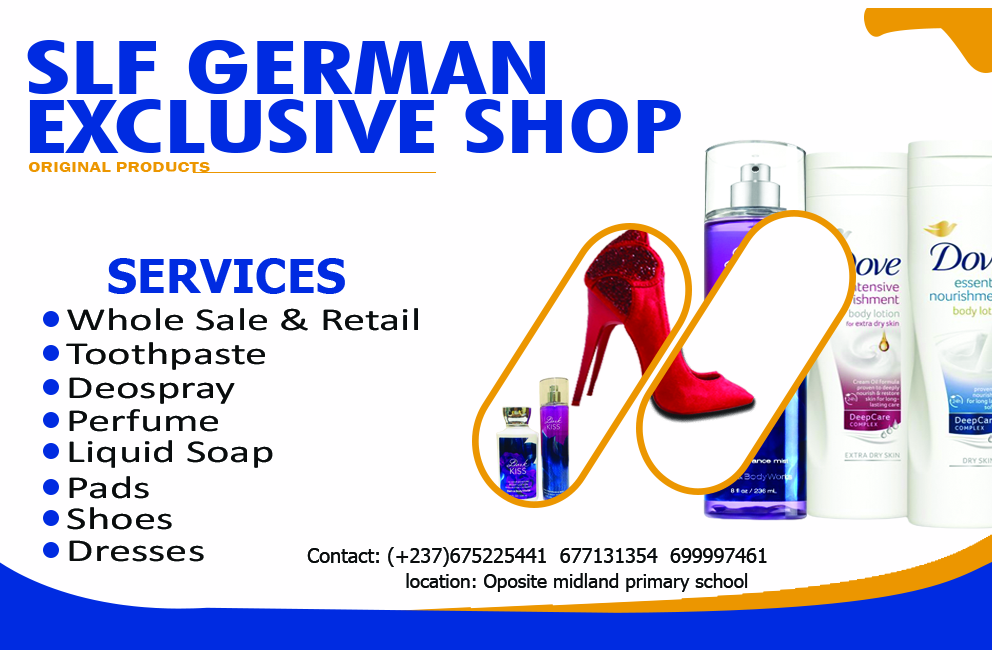
<style>
.page{position:relative;width:992px;height:650px;background:#fffeff}
.page>*{position:absolute;margin:0}
.t1{font:74.4px "FuturaBT-BoldCondensed";color:#002be1;scale:1.59 1}
.t2{font:74.3px "FuturaBT-BoldCondensed";color:#002be1;scale:1.51 1}
.t3{font:14.7px "FranklinGothic-Demi";color:#ec9600;scale:1.31 1}
.t4{font:47.4px "Tahoma-Bold";color:#002be1}
.t5{font:31.9px "Calibri";color:#0b0d0e;scale:1.39 1}
.t6{font:31.9px "Calibri";color:#0a0c0d;scale:1.39 1}
.t7{font:31.9px "Calibri";color:#090b0c;scale:1.39 1}
.t8{font:31.9px "Calibri";color:#0a0d0e;scale:1.39 1}
.t9{font:31.9px "Calibri";color:#090b0b;scale:1.39 1}
.t10{font:31.9px "Calibri";color:#0b0e0e;scale:1.39 1}
.t11{font:19.9px "Tahoma";color:#0a0c0d}
.t12{font:19.1px "Tahoma";color:#0a0c0d}
</style>
<div class="page">
<p class="t1" style="left:27px;top:40px;width:518px;height:54px">SLF GERMAN</p>
<p class="t2" style="left:29px;top:99px;width:652px;height:54px">EXCLUSIVE SHOP</p>
<p class="t3" style="left:28px;top:162px;width:182px;height:10px">ORIGINAL PRODUCTS</p>
<p class="t4" style="left:108px;top:258px;width:237px;height:36px">SERVICES</p>
<p class="t5" style="left:67px;top:308px;width:351px;height:23px">Whole Sale &amp; Retail</p>
<p class="t6" style="left:66px;top:342px;width:199px;height:28px">Toothpaste</p>
<p class="t7" style="left:69px;top:377px;width:166px;height:27px">Deospray</p>
<p class="t8" style="left:69px;top:409px;width:149px;height:23px">Perfume</p>
<p class="t8" style="left:69px;top:440px;width:204px;height:28px">Liquid Soap</p>
<p class="t7" style="left:69px;top:476px;width:80px;height:23px">Pads</p>
<p class="t9" style="left:67px;top:507px;width:105px;height:23px">Shoes</p>
<p class="t10" style="left:69px;top:540px;width:135px;height:22px">Dresses</p>
<p class="t11" style="left:307px;top:547px;width:460px;height:20px">Contact: (+237)675225441  677131354  699997461</p>
<p class="t12" style="left:406px;top:573px;width:342px;height:19px">location: Oposite midland primary school</p>
</div>
